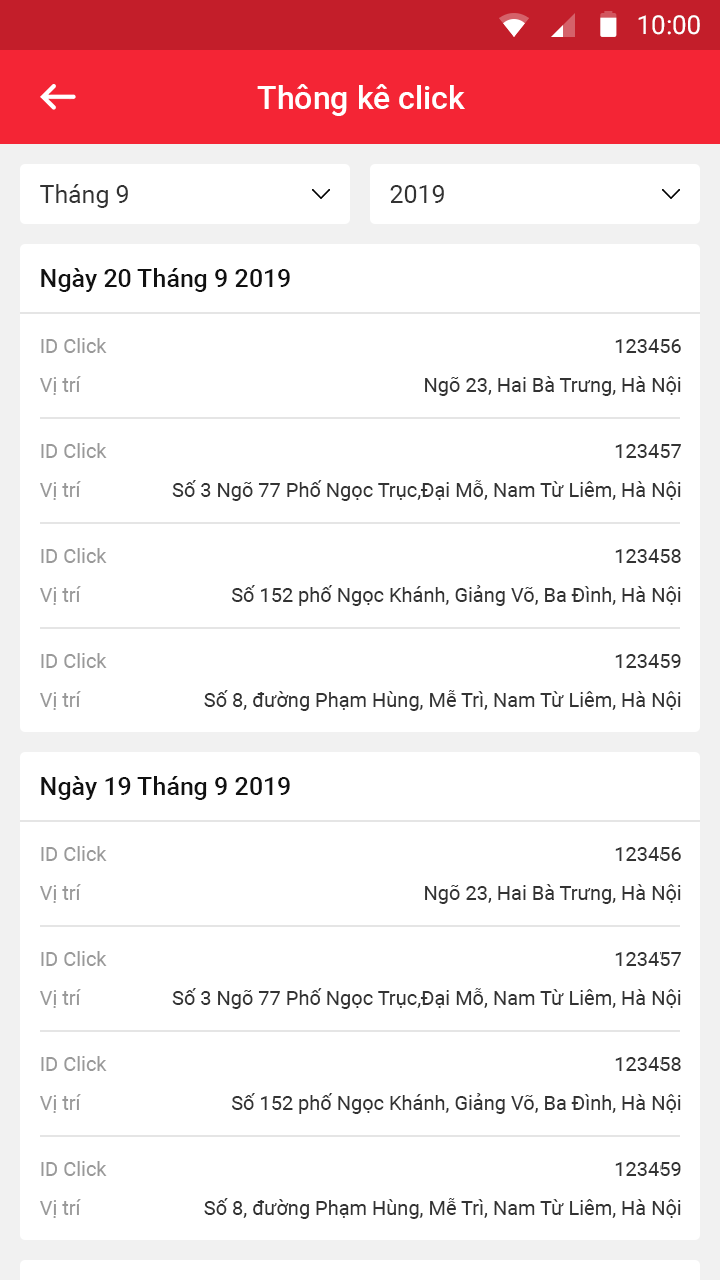
<style>
.page{position:relative;width:720px;height:1280px;background:#ffffff}
.page>*{position:absolute;margin:0}
.t1{font:26px "Roboto-Regular";color:#ffffff}
.t2{font:32px "Roboto-Medium";color:#ffffff}
.t3{font:25px "Roboto-Regular";color:#333333}
.t4{font:25px "Roboto-Medium";color:#111111}
.t5{font:20px/39px "Roboto-Regular";color:#999999}
.t6{font:20px/39px "Roboto-Regular";color:#333333}
</style>
<div class="page">
<p class="t1" style="left:638px;top:15px;width:62px;height:20px">10:00</p>
<p class="t2" style="left:257px;top:84px;width:208px;height:32px">Thông kê click</p>
<p class="t3" style="left:40px;top:184px;width:88px;height:24px">Tháng 9</p>
<p class="t3" style="left:390px;top:185px;width:54px;height:18px">2019</p>
<p class="t4" style="left:41px;top:268px;width:249px;height:24px">Ngày 20 Tháng 9 2019</p>
<p class="t5" style="left:40px;top:338px;width:67px;height:57px">ID Click<br>Vị trí</p>
<p class="t6" style="left:425px;top:339px;width:256px;height:57px;text-align:right">123456<br>Ngõ 23, Hai Bà Trưng, Hà Nội</p>
<p class="t5" style="left:40px;top:443px;width:67px;height:57px">ID Click<br>Vị trí</p>
<p class="t6" style="left:172px;top:444px;width:509px;height:57px;text-align:right">123457<br>Số 3 Ngõ 77 Phố Ngọc Trục,Đại Mỗ, Nam Từ Liêm, Hà Nội</p>
<p class="t5" style="left:40px;top:548px;width:67px;height:57px">ID Click<br>Vị trí</p>
<p class="t6" style="left:232px;top:549px;width:449px;height:57px;text-align:right">123458<br>Số 152 phố Ngọc Khánh, Giảng Võ, Ba Đình, Hà Nội</p>
<p class="t5" style="left:40px;top:653px;width:67px;height:57px">ID Click<br>Vị trí</p>
<p class="t6" style="left:204px;top:654px;width:477px;height:57px;text-align:right">123459<br>Số 8, đường Phạm Hùng, Mễ Trì, Nam Từ Liêm, Hà Nội</p>
<p class="t4" style="left:41px;top:776px;width:249px;height:24px">Ngày 19 Tháng 9 2019</p>
<p class="t5" style="left:40px;top:846px;width:67px;height:57px">ID Click<br>Vị trí</p>
<p class="t6" style="left:425px;top:847px;width:256px;height:57px;text-align:right">123456<br>Ngõ 23, Hai Bà Trưng, Hà Nội</p>
<p class="t5" style="left:40px;top:951px;width:67px;height:57px">ID Click<br>Vị trí</p>
<p class="t6" style="left:172px;top:952px;width:509px;height:57px;text-align:right">123457<br>Số 3 Ngõ 77 Phố Ngọc Trục,Đại Mỗ, Nam Từ Liêm, Hà Nội</p>
<p class="t5" style="left:40px;top:1056px;width:67px;height:57px">ID Click<br>Vị trí</p>
<p class="t6" style="left:232px;top:1057px;width:449px;height:57px;text-align:right">123458<br>Số 152 phố Ngọc Khánh, Giảng Võ, Ba Đình, Hà Nội</p>
<p class="t5" style="left:40px;top:1161px;width:67px;height:57px">ID Click<br>Vị trí</p>
<p class="t6" style="left:204px;top:1162px;width:477px;height:57px;text-align:right">123459<br>Số 8, đường Phạm Hùng, Mễ Trì, Nam Từ Liêm, Hà Nội</p>
</div>
